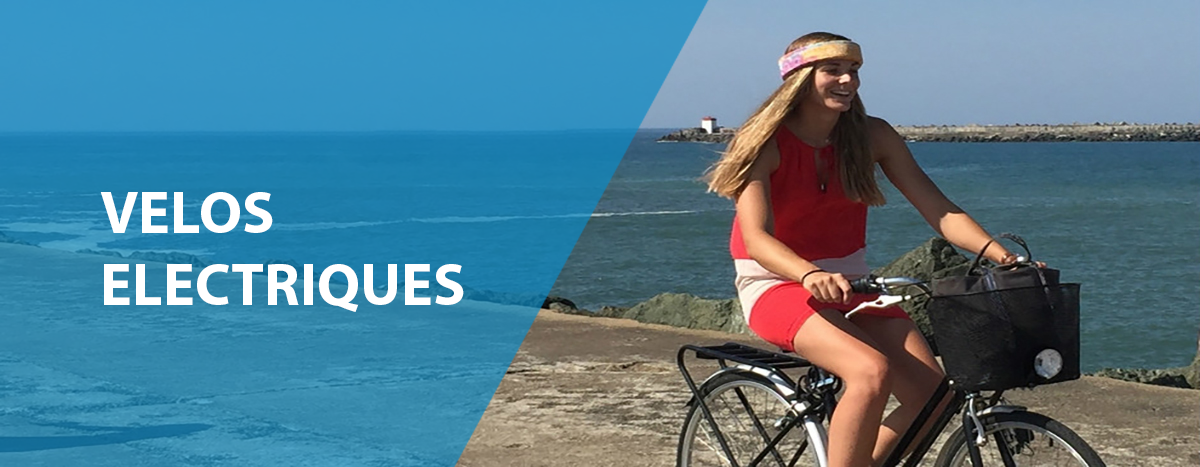
<style>
.page{position:relative;width:1200px;height:467px}
.page>*{position:absolute;margin:0}
.t1{font:60px "MyriadPro-Bold";color:#ffffff}
</style>
<div class="page">
<p class="t1" style="left:100px;top:192px;width:364px;height:120px">VELOS<br>ELECTRIQUES</p>
</div>
